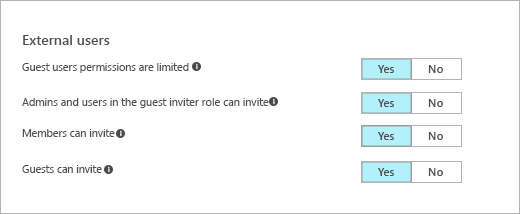
<style>
.page{position:relative;width:520px;height:214px;background:#ffffff}
.page>*{position:absolute;margin:0}
.t1{font:14px "SegoeUI-Semibold";color:#505050}
.t2{font:10.7px "SegoeUI";color:#505050}
.t3{font:11.3px "SegoeUI-Semibold";color:#505050}
.t4{font:10.8px "SegoeUI";color:#505050}
</style>
<div class="page">
<p class="t1" style="left:23px;top:35px;width:87px;height:10px">External users</p>
<p class="t2" style="left:22px;top:63px;width:167px;height:10px">Guest users permissions are limited</p>
<p class="t3" style="left:378px;top:65px;width:16px;height:8px">Yes</p>
<p class="t3" style="left:428px;top:65px;width:15px;height:8px">No</p>
<p class="t4" style="left:22px;top:98px;width:247px;height:10px">Admins and users in the guest inviter role can invite</p>
<p class="t3" style="left:378px;top:99px;width:16px;height:8px">Yes</p>
<p class="t3" style="left:428px;top:99px;width:15px;height:8px">No</p>
<p class="t2" style="left:22px;top:129px;width:93px;height:8px">Members can invite</p>
<p class="t3" style="left:378px;top:132px;width:16px;height:8px">Yes</p>
<p class="t3" style="left:428px;top:132px;width:15px;height:8px">No</p>
<p class="t2" style="left:22px;top:165px;width:80px;height:8px">Guests can invite</p>
<p class="t3" style="left:378px;top:168px;width:16px;height:8px">Yes</p>
<p class="t3" style="left:428px;top:168px;width:15px;height:8px">No</p>
</div>
